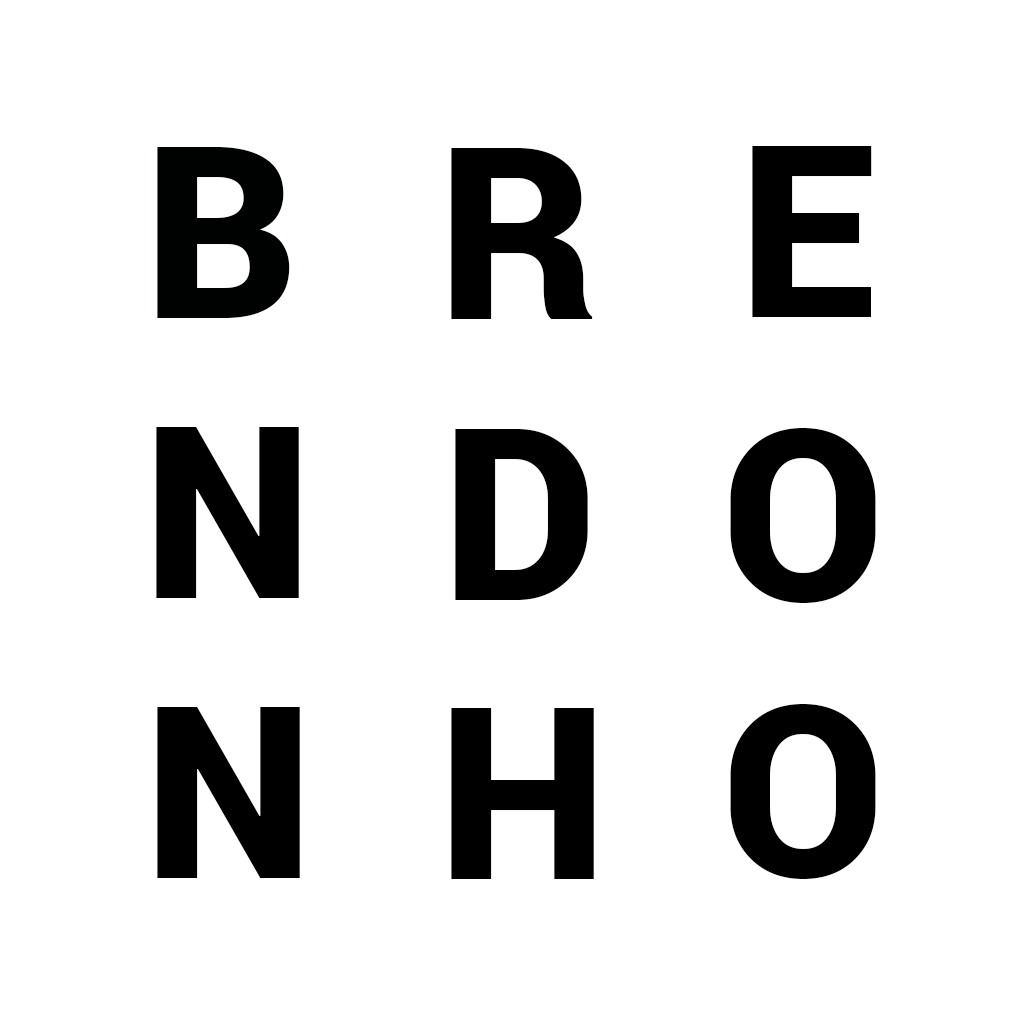
<style>
.page{position:relative;width:1024px;height:1024px;background:#ffffff}
.page>*{position:absolute;margin:0}
.t1{font:240px "Roboto-Black";color:#000101}
.t2{font:240px "Roboto-Black";color:#000000}
</style>
<div class="page">
<p class="t1" style="left:157px;top:147px;width:133px;height:171px">B</p>
<p class="t2" style="left:451px;top:148px;width:142px;height:171px">R</p>
<p class="t2" style="left:752px;top:146px;width:120px;height:171px">E</p>
<p class="t2" style="left:156px;top:427px;width:143px;height:171px">N</p>
<p class="t2" style="left:455px;top:429px;width:133px;height:171px">D</p>
<p class="t2" style="left:730px;top:428px;width:146px;height:175px">O</p>
<p class="t2" style="left:157px;top:707px;width:143px;height:171px">N</p>
<p class="t2" style="left:451px;top:708px;width:143px;height:171px">H</p>
<p class="t2" style="left:730px;top:704px;width:146px;height:175px">O</p>
</div>
